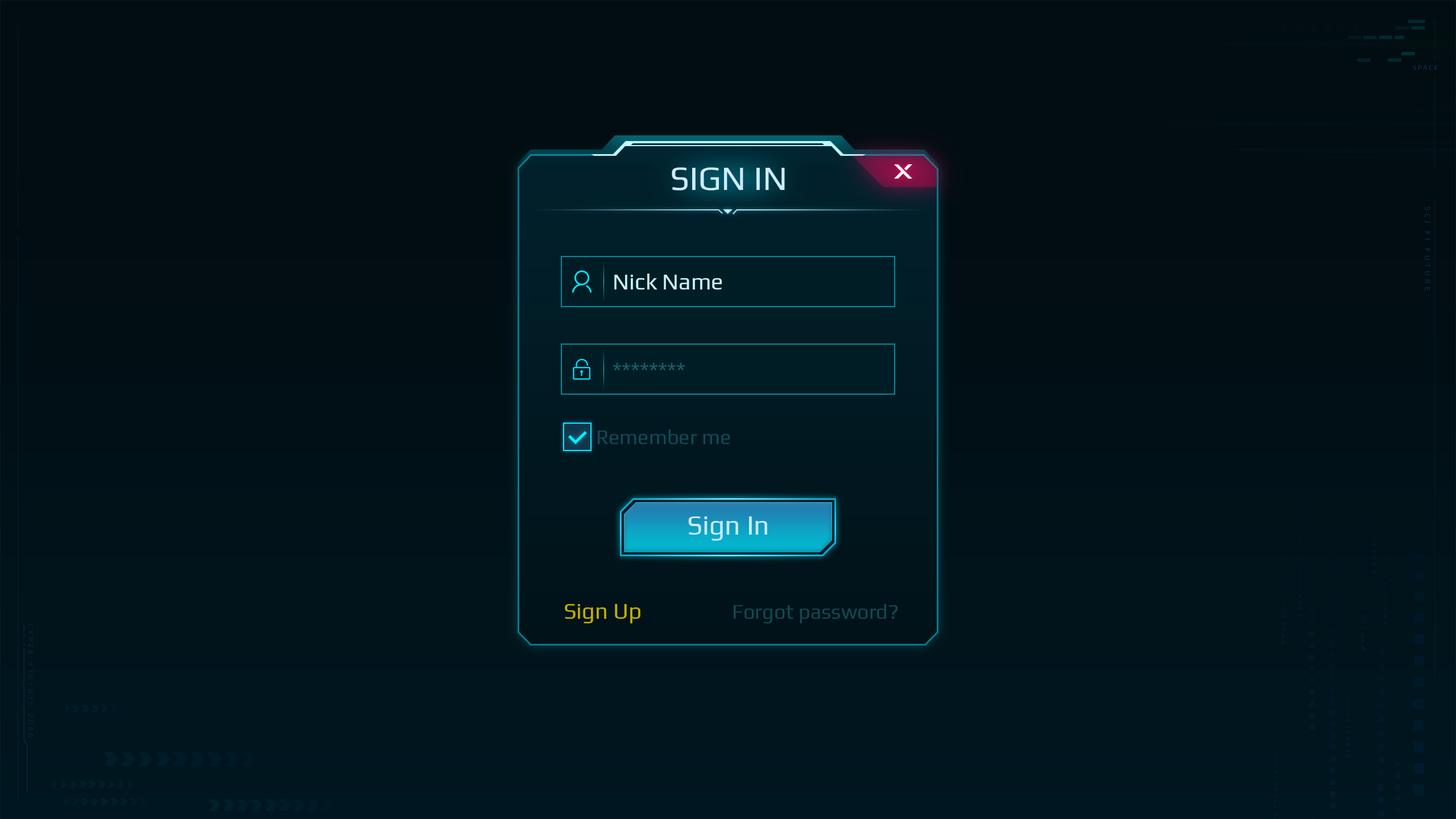
<style>
.page{position:relative;width:1456px;height:819px;background:#020d12}
.page>*{position:absolute;margin:0}
.t1{font:34.1px "Play-Regular";color:#b7ecff}
.t2{font:22.7px "Play-Regular";color:#c5f7ff}
.t3{font:22.7px "Play-Regular";color:#17606d}
.t4{font:20.5px "Play-Regular";color:#124955}
.t5{font:27.3px "Play-Regular";color:#c6edff}
.t6{font:22.7px "Play-Regular";color:#c3ae00}
.t7{font:20.5px "Play-Regular";color:#134851}
</style>
<div class="page">
<p class="t1" style="left:672px;top:167px;width:113px;height:24px">SIGN IN</p>
<p class="t2" style="left:614px;top:274px;width:108px;height:15px">Nick Name</p>
<p class="t3" style="left:613px;top:363px;width:72px;height:8px">********</p>
<p class="t4" style="left:598px;top:429px;width:132px;height:15px">Remember me</p>
<p class="t5" style="left:688px;top:516px;width:79px;height:25px">Sign In</p>
<p class="t6" style="left:565px;top:604px;width:75px;height:19px">Sign Up</p>
<p class="t7" style="left:734px;top:604px;width:163px;height:19px">Forgot password?</p>
</div>
